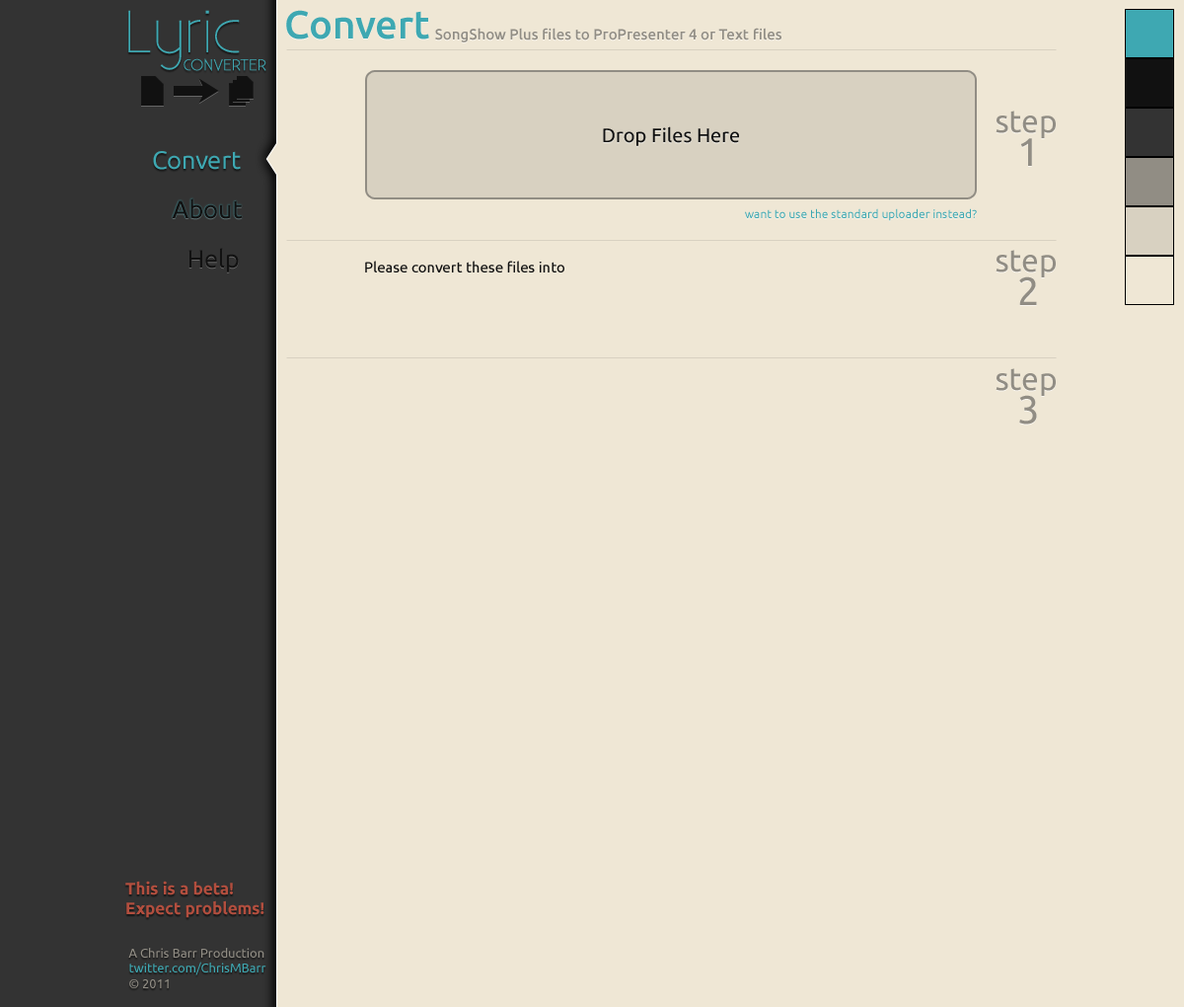
<style>
.page{position:relative;width:1184px;height:1007px;background:#efe7d5}
.page>*{position:absolute;margin:0}
.t1{font:59.4px "Existence-Light";color:#3ea8b2}
.t2{font:39.5px "Ubuntu-Medium";color:#3ea8b2}
.t3{font:14.8px "Ubuntu-Medium";color:#918d84}
.t4{font:15.5px "Existence-Light";color:#3ea8b2;font-weight:bold}
.t5{font:15.5px "Existence-Light";letter-spacing:0.02em;color:#3ea8b2;font-weight:bold}
.t6{font:31.4px "Ubuntu";color:#918d84}
.t7{font:19.5px "Ubuntu";color:#111111}
.t8{font:39.5px "Ubuntu";color:#918d84}
.t9{font:24.8px "Ubuntu";color:#3ea8b2}
.t10{font:24.8px "Ubuntu";color:#111111}
.t11{font:11.8px "Ubuntu";color:#3ea8b2}
.t12{font:14.8px "Ubuntu";color:#111111}
.t13{font:16.8px/19.7px "Ubuntu-Bold";color:#b24e3e}
.t14{font:12.8px "Ubuntu";color:#918d84}
.t15{font:12.8px "Ubuntu";color:#3ea8b2}
</style>
<div class="page">
<p class="t1" style="left:128px;top:10px;width:112px;height:60px">Lyric</p>
<p class="t2" style="left:286px;top:10px;width:143px;height:29px">Convert</p>
<p class="t3" style="left:435px;top:28px;width:347px;height:14px">SongShow Plus files to ProPresenter 4 or Text files</p>
<p class="t4" style="left:184px;top:58px;width:82px;height:13px">CO<span class="t5">N</span>VERTER</p>
<p class="t6" style="left:996px;top:111px;width:60px;height:27px">step</p>
<p class="t7" style="left:603px;top:126px;width:136px;height:20px">Drop Files Here</p>
<p class="t8" style="left:1021px;top:138px;width:11px;height:28px">1</p>
<p class="t9" style="left:153px;top:151px;width:88px;height:19px">Convert</p>
<p class="t10" style="left:172px;top:198px;width:71px;height:21px">About</p>
<p class="t11" style="left:745px;top:208px;width:232px;height:13px">want to use the standard uploader instead?</p>
<p class="t10" style="left:189px;top:248px;width:50px;height:24px">Help</p>
<p class="t6" style="left:996px;top:250px;width:60px;height:27px">step</p>
<p class="t12" style="left:365px;top:261px;width:200px;height:11px">Please convert these files into</p>
<p class="t8" style="left:1020px;top:276px;width:17px;height:29px">2</p>
<p class="t6" style="left:996px;top:368px;width:60px;height:28px">step</p>
<p class="t8" style="left:1020px;top:395px;width:17px;height:29px">3</p>
<p class="t13" style="left:125px;top:880px;width:140px;height:38px">This is a beta!<br>Expect problems!</p>
<p class="t14" style="left:128px;top:948px;width:138px;height:40px">A Chris Barr Production<br><span class="t15">twitter.com/ChrisMBarr<br></span>© 2011</p>
</div>
